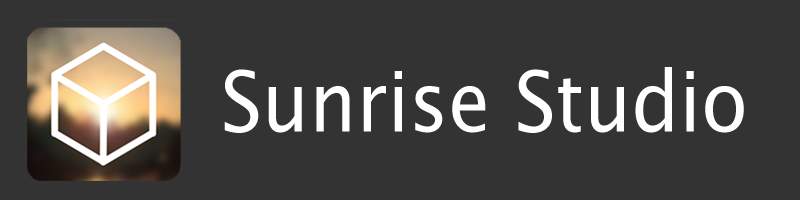
<style>
.page{position:relative;width:800px;height:200px;background:#333333}
.page>*{position:absolute;margin:0}
.t1{font:83.7px "LucidaSansUnicode";color:#ffffff;scale:0.91 1}
</style>
<div class="page">
<p class="t1" style="left:224px;top:67px;width:520px;height:66px">Sunrise Studio</p>
</div>
